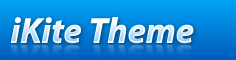
<style>
.page{position:relative;width:236px;height:60px}
.page>*{position:absolute;margin:0}
.t1{font:36px "MyriadPro-BoldIt";letter-spacing:-0.025em;font-weight:bold}
</style>
<div class="page">
<p class="t1" style="left:10px;top:17px;width:184px;height:27px">iKite Theme</p>
</div>
